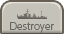
<style>
.page{position:relative;width:64px;height:34px;background:#c5c2b9}
.page>*{position:absolute;margin:0}
.t1{font:10px "UDShinGoPro-Light";color:#6a6560;scale:0.9 1}
</style>
<div class="page">
<p class="t1" style="left:10px;top:22px;width:44px;height:11px">Destroyer</p>
</div>
